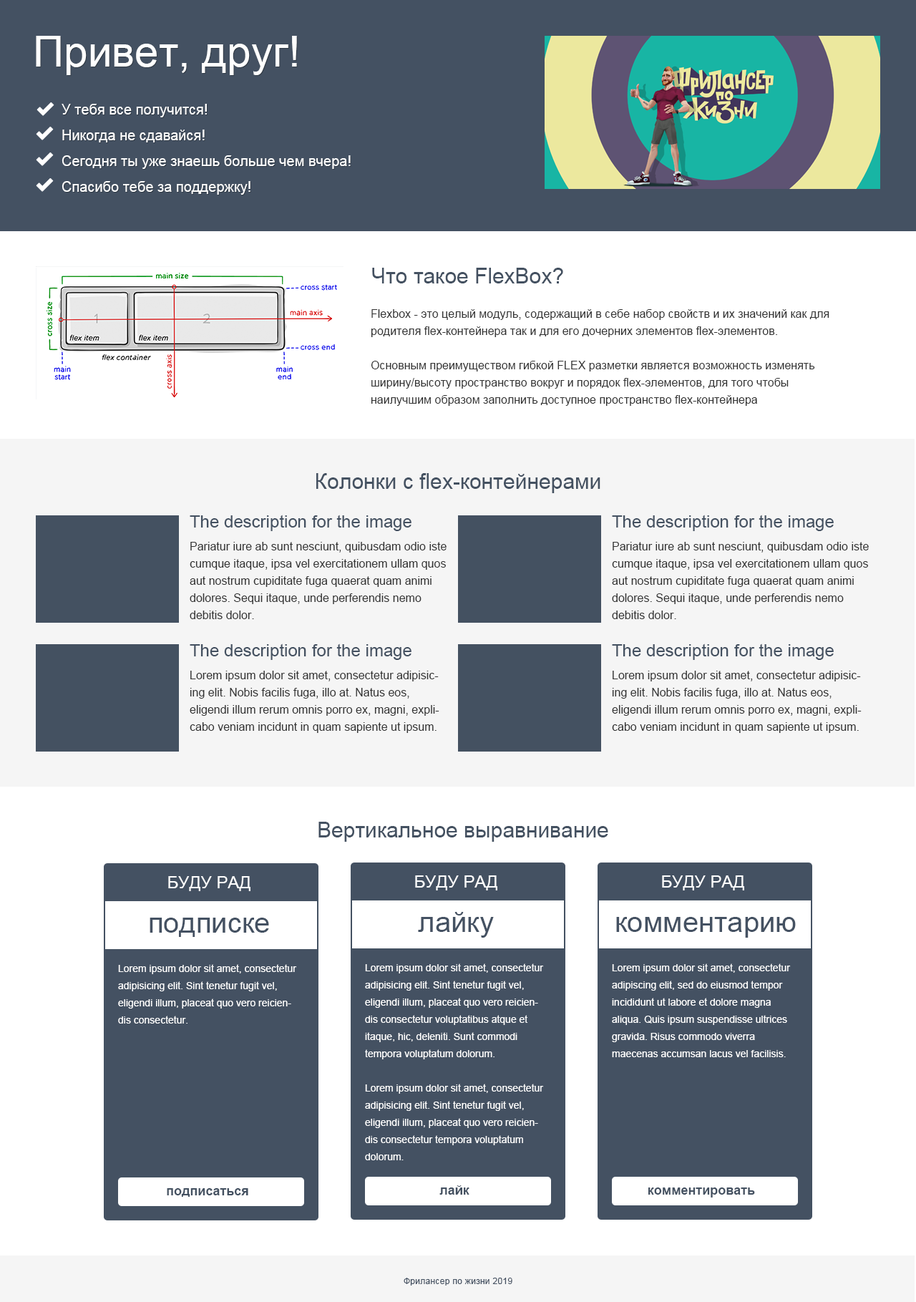
<style>
.page{position:relative;width:916px;height:1302px;background:#ffffff}
.page>*{position:absolute;margin:0}
.t1{font:42.9px "ArialMT";color:#ffffff}
.t2{font:14.3px/25.8px "ArialMT";color:#ffffff}
.t3{font:21.5px "ArialMT";color:#445161}
.t4{font:11.5px/17.2px "ArialMT";color:#333333}
.t5{font:17.2px "ArialMT";color:#445161}
.t6{font:17.2px "ArialMT";color:#ffffff;text-transform:uppercase}
.t7{font:28.6px "ArialMT";color:#445162}
.t8{font:10px/17.2px "ArialMT";color:#ffffff}
.t9{font:12.9px "Arial-BoldMT";color:#445161}
.t10{font:8.6px "ArialMT";letter-spacing:0.025em;color:#445162}
</style>
<div class="page">
<p class="t1" style="left:36px;top:36px;width:261px;height:39px">Привет, друг!</p>
<p class="t2" style="left:62px;top:104px;width:289px;height:91px">У тебя все получится!<br>Никогда не сдавайся!<br>Сегодня ты уже знаешь больше чем вчера!<br>Спасибо тебе за поддержку!</p>
<p class="t3" style="left:372px;top:268px;width:191px;height:15px">Что такое FlexBox?</p>
<p class="t4" style="left:371px;top:309px;width:458px;height:97px">Flexbox - это целый модуль, содержащий в себе набор свойств и их значений как для родителя flex-контейнера так и для его дочерних элементов flex-элементов. <br><br>Основным преимуществом гибкой FLEX разметки является возможность изменять ширину/высоту пространство вокруг и порядок flex-элементов, для того чтобы наилучшим образом заполнить доступное пространство flex-контейнера</p>
<p class="t3" style="left:316px;top:473px;width:284px;height:20px">Колонки с flex-контейнерами</p>
<p class="t5" style="left:190px;top:515px;width:221px;height:16px">The description for the image</p>
<p class="t5" style="left:612px;top:515px;width:222px;height:16px">The description for the image</p>
<p class="t4" style="left:190px;top:542px;width:257px;height:77px">Pariatur iure ab sunt nesciunt, quibusdam odio iste cumque itaque, ipsa vel exercitationem ullam quos aut nostrum cupiditate fuga quaerat quam animi dolores. Sequi itaque, unde perferendis nemo debitis dolor.</p>
<p class="t4" style="left:612px;top:542px;width:257px;height:77px">Pariatur iure ab sunt nesciunt, quibusdam odio iste cumque itaque, ipsa vel exercitationem ullam quos aut nostrum cupiditate fuga quaerat quam animi dolores. Sequi itaque, unde perferendis nemo debitis dolor.</p>
<p class="t5" style="left:190px;top:643px;width:221px;height:17px">The description for the image</p>
<p class="t5" style="left:612px;top:643px;width:222px;height:17px">The description for the image</p>
<p class="t4" style="left:190px;top:671px;width:249px;height:62px">Lorem ipsum dolor sit amet, consectetur adipisicing elit. Nobis facilis fuga, illo at. Natus eos, eligendi illum rerum omnis porro ex, magni, explicabo veniam incidunt in quam sapiente ut ipsum.</p>
<p class="t4" style="left:612px;top:671px;width:250px;height:62px">Lorem ipsum dolor sit amet, consectetur adipisicing elit. Nobis facilis fuga, illo at. Natus eos, eligendi illum rerum omnis porro ex, magni, explicabo veniam incidunt in quam sapiente ut ipsum.</p>
<p class="t3" style="left:318px;top:822px;width:290px;height:20px">Вертикальное выравнивание</p>
<p class="t6" style="left:168px;top:876px;width:82px;height:15px">буду рад</p>
<p class="t6" style="left:415px;top:875px;width:82px;height:15px">буду рад</p>
<p class="t6" style="left:662px;top:875px;width:82px;height:15px">буду рад</p>
<p class="t7" style="left:150px;top:917px;width:119px;height:20px">подписке</p>
<p class="t7" style="left:418px;top:912px;width:76px;height:25px">лайку</p>
<p class="t7" style="left:616px;top:917px;width:180px;height:20px">комментарию</p>
<p class="t8" style="left:118px;top:964px;width:179px;height:59px">Lorem ipsum dolor sit amet, consectetur adipisicing elit. Sint tenetur fugit vel, eligendi illum, placeat quo vero reiciendis consectetur.</p>
<p class="t8" style="left:365px;top:963px;width:179px;height:197px">Lorem ipsum dolor sit amet, consectetur adipisicing elit. Sint tenetur fugit vel, eligendi illum, placeat quo vero reiciendis consectetur voluptatibus atque et itaque, hic, deleniti. Sunt commodi tempora voluptatum dolorum.<br><br>Lorem ipsum dolor sit amet, consectetur adipisicing elit. Sint tenetur fugit vel, eligendi illum, placeat quo vero reiciendis consectetur tempora voluptatum dolorum.</p>
<p class="t8" style="left:612px;top:963px;width:179px;height:94px">Lorem ipsum dolor sit amet, consectetur adipiscing elit, sed do eiusmod tempor incididunt ut labore et dolore magna aliqua. Quis ipsum suspendisse ultrices gravida. Risus commodo viverra maecenas accumsan lacus vel facilisis.</p>
<p class="t9" style="left:167px;top:1188px;width:81px;height:9px">подписаться</p>
<p class="t9" style="left:439px;top:1185px;width:30px;height:9px">лайк</p>
<p class="t9" style="left:648px;top:1187px;width:107px;height:10px">комментировать</p>
<p class="t10" style="left:404px;top:1277px;width:108px;height:8px">Фрилансер по жизни 2019</p>
</div>
